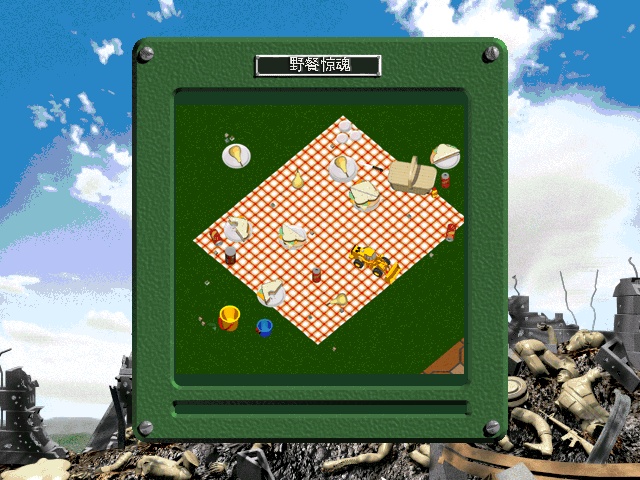
<style>
.page{position:relative;width:640px;height:480px}
.page>*{position:absolute;margin:0}
.t1{font:16px "SimHei";color:#f3f0ed}
</style>
<div class="page">
<p class="t1" style="left:290px;top:57px;width:60px;height:15px">野餐惊魂</p>
</div>
